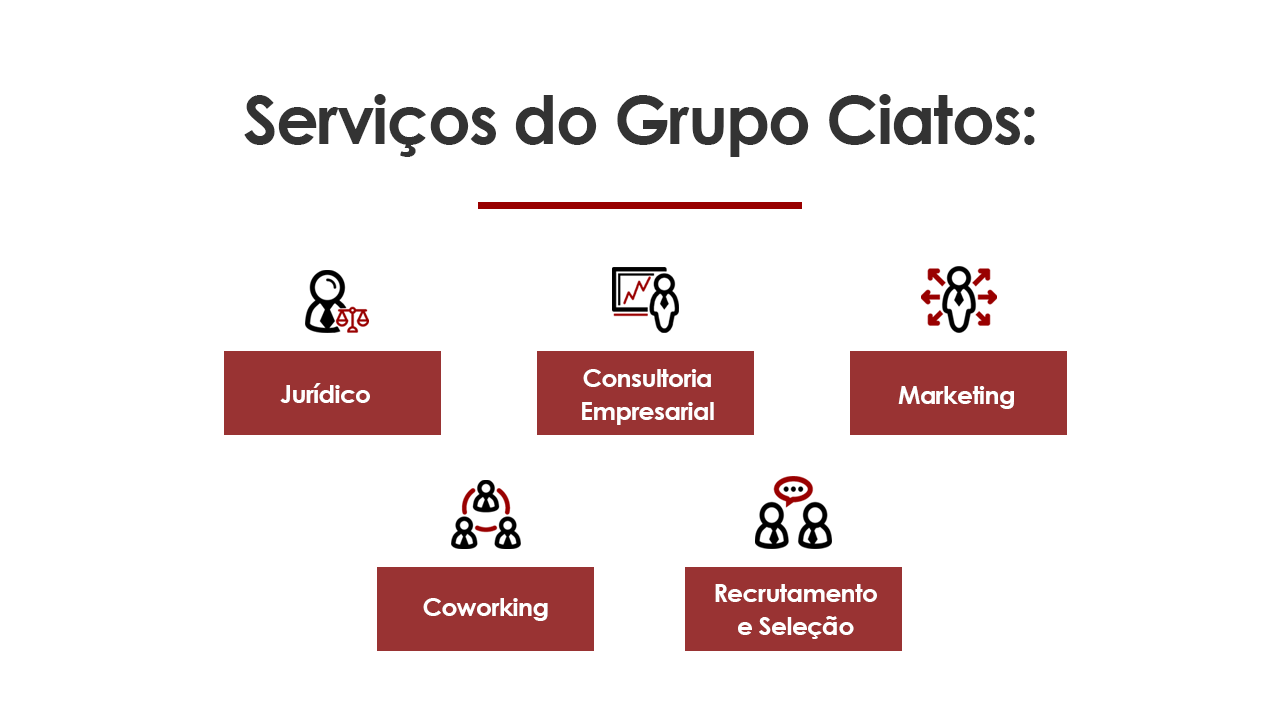
<style>
.page{position:relative;width:1280px;height:720px;background:#ffffff}
.page>*{position:absolute;margin:0}
.t1{font:66.7px "CenturyGothic-Bold";letter-spacing:-0.025em;color:#333333}
.t2{font:25px/33.3px "CenturyGothic-Bold";letter-spacing:-0.025em;color:#ffffff}
.t3{font:25px "CenturyGothic-Bold";letter-spacing:-0.025em;color:#ffffff}
</style>
<div class="page">
<p class="t1" style="left:244px;top:94px;width:791px;height:63px">Serviços do Grupo Ciatos:</p>
<p class="t2" style="left:582px;top:369px;width:132px;height:56px;text-align:center">Consultoria<br>Empresarial</p>
<p class="t3" style="left:280px;top:383px;width:90px;height:20px">Jurídico</p>
<p class="t3" style="left:898px;top:386px;width:116px;height:23px">Marketing</p>
<p class="t2" style="left:715px;top:584px;width:162px;height:55px;text-align:center">Recrutamento<br>e Seleção</p>
<p class="t3" style="left:423px;top:598px;width:125px;height:23px">Coworking</p>
</div>
